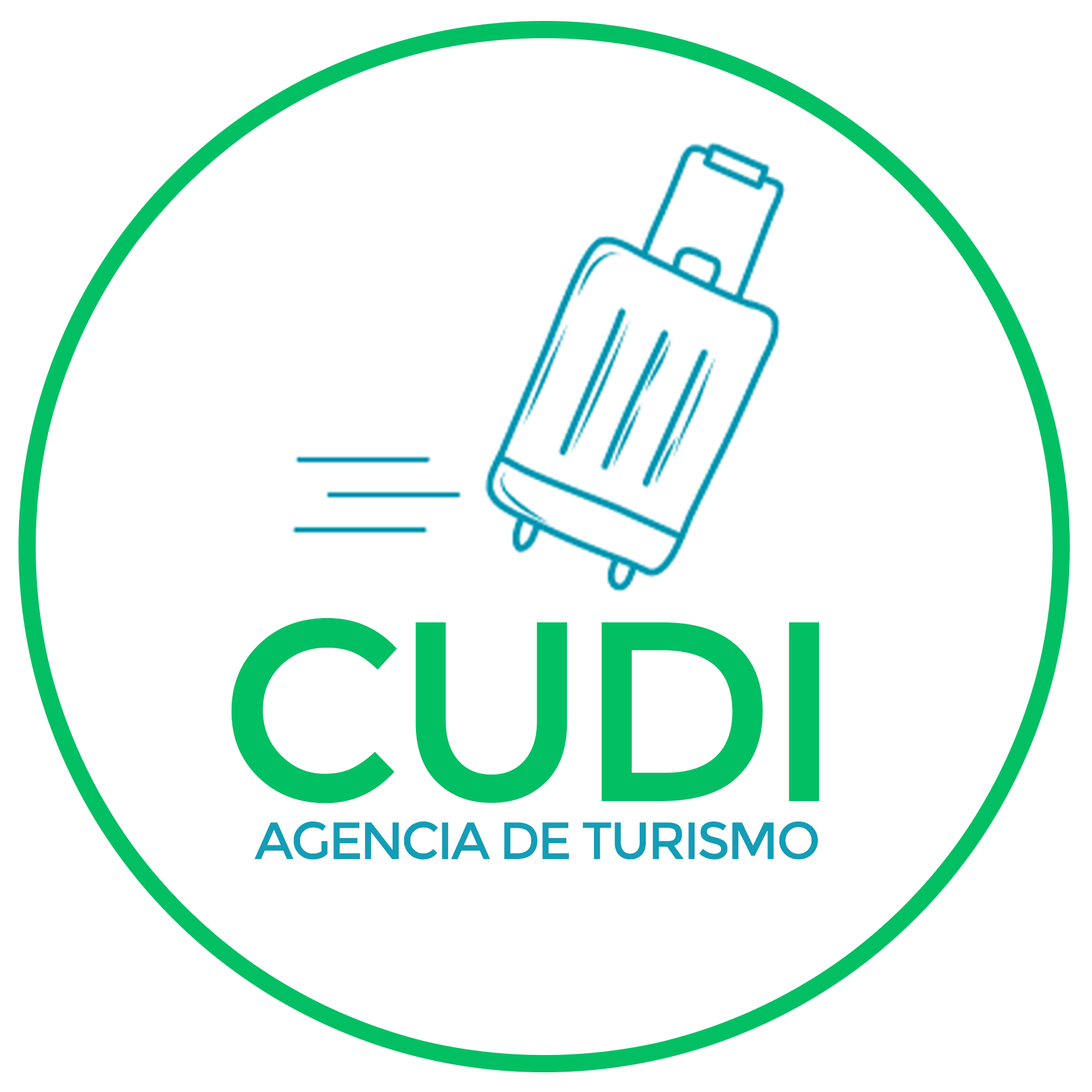
<style>
.page{position:relative;width:1092px;height:1092px;background:#ffffff}
.page>*{position:absolute;margin:0}
.t1{font:255.6px "Montserrat-Regular";letter-spacing:-0.05em;color:#02bf64}
.t2{font:52.5px "Montserrat-Regular";letter-spacing:-0.05em;color:#139db6}
</style>
<div class="page">
<p class="t1" style="left:231px;top:617px;width:589px;height:187px">CUDI</p>
<p class="t2" style="left:255px;top:821px;width:563px;height:39px">AGENCIA DE TURISMO</p>
</div>
